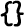
<style>
.page{position:relative;width:24px;height:27px;background:#ffffff}
.page>*{position:absolute;margin:0}
.t1{font:25px "SegoeScript";color:#000000;font-weight:bold;scale:1.08 1}
</style>
<div class="page">
<p class="t1" style="left:0px;top:0px;width:24px;height:27px">{}</p>
</div>
